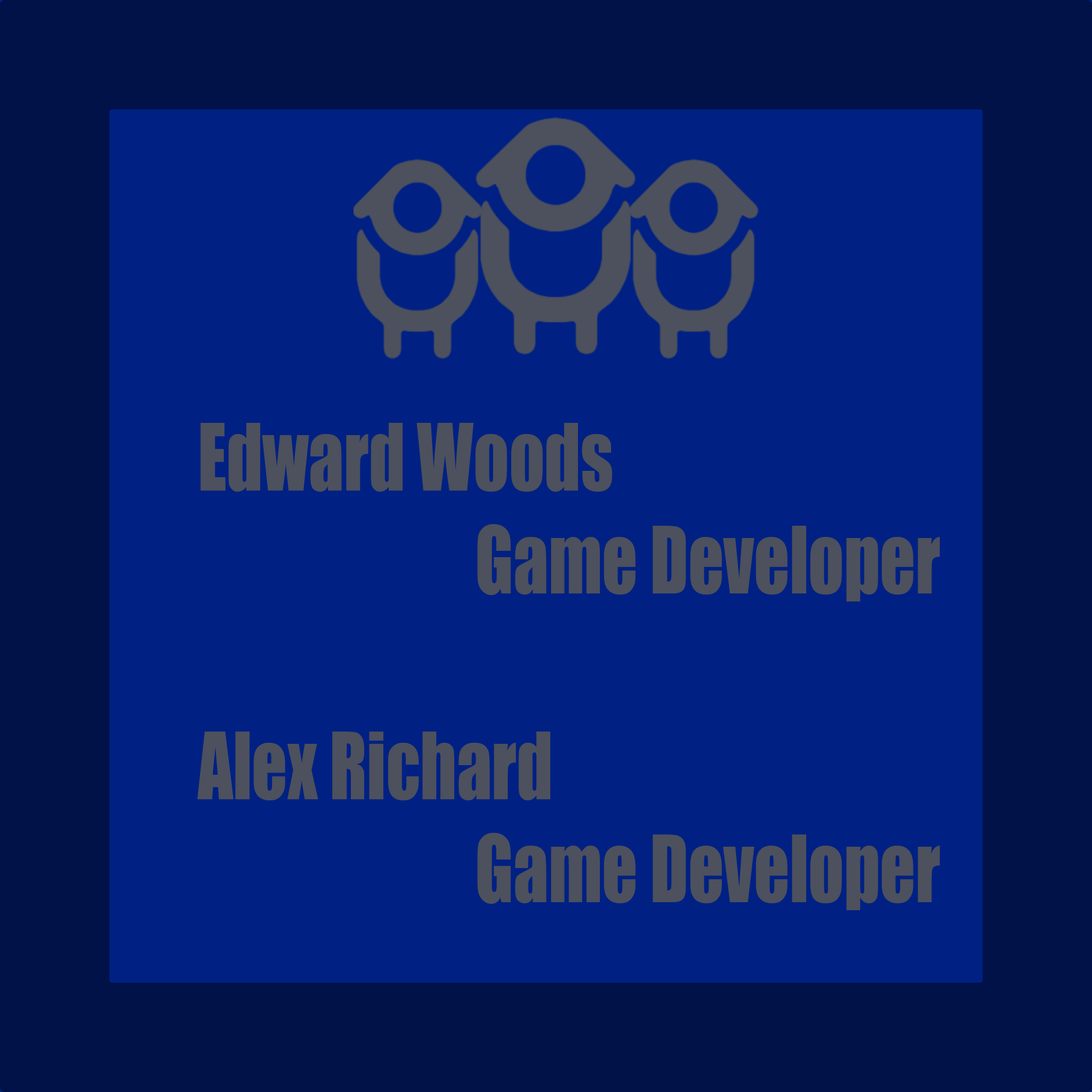
<style>
.page{position:relative;width:1092px;height:1092px;background:#002183}
.page>*{position:absolute;margin:0}
.t1{font:85.8px "Impact";color:#4d505d;scale:0.81 1}
</style>
<div class="page">
<p class="t1" style="left:197px;top:423px;width:743px;height:487px">Edward Woods<br>        Game Developer<br><br>Alex Richard<br>        Game Developer</p>
</div>
